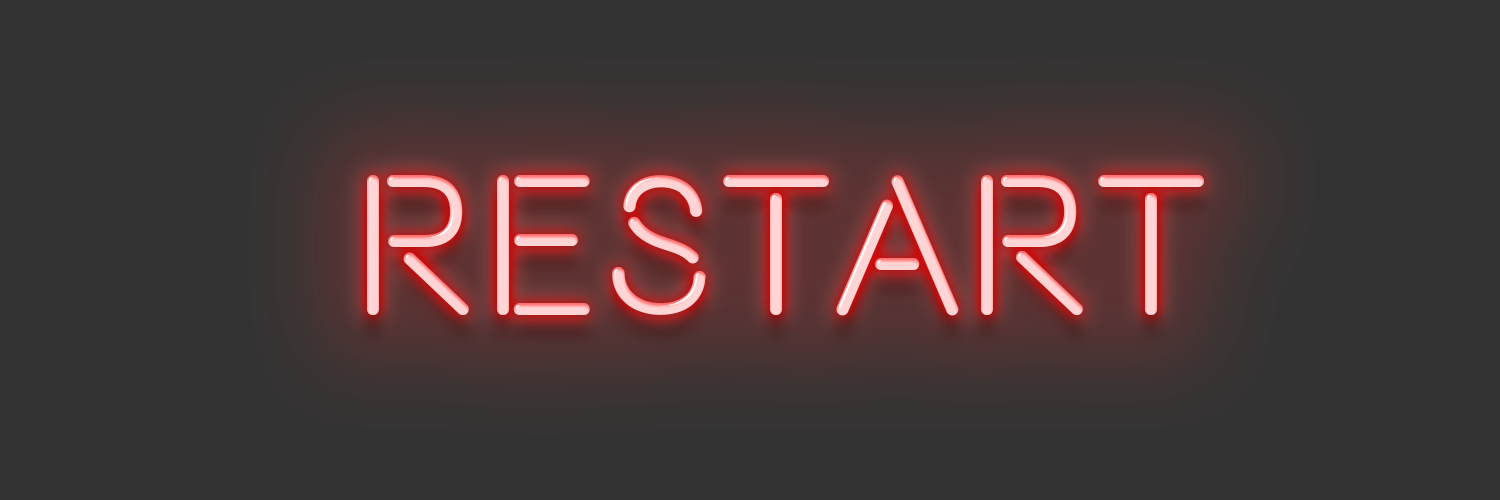
<style>
.page{position:relative;width:1500px;height:500px;background:#333333}
.page>*{position:absolute;margin:0}
.t1{font:200px "Beon-Medium";color:#ffd4d4}
</style>
<div class="page">
<p class="t1" style="left:367px;top:175px;width:837px;height:141px">Restart</p>
</div>
